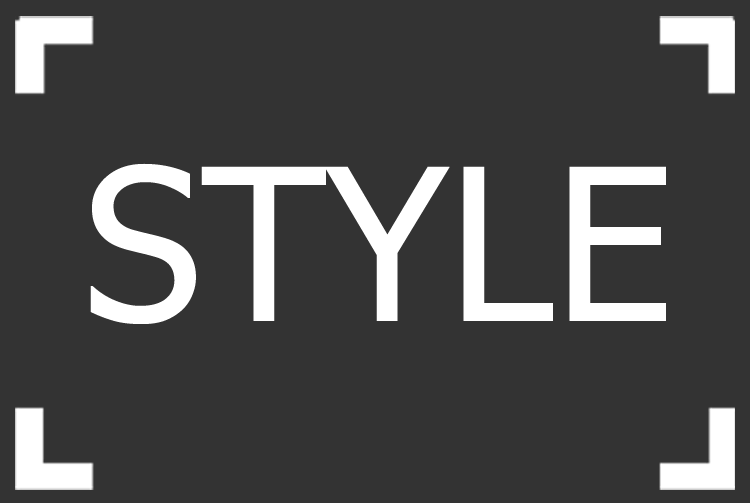
<style>
.page{position:relative;width:750px;height:503px;background:#333333}
.page>*{position:absolute;margin:0}
.t1{font:212.1px "Tahoma";color:#ffffff}
</style>
<div class="page">
<p class="t1" style="left:90px;top:163px;width:576px;height:161px">STYLE</p>
</div>
